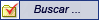
<style>
.page{position:relative;width:99px;height:20px;background:#cfd3df}
.page>*{position:absolute;margin:0}
.t1{font:11.2px "Arial-ItalicMT";color:#000033}
</style>
<div class="page">
<p class="t1" style="left:34px;top:5px;width:46px;height:8px">Buscar ...</p>
</div>
